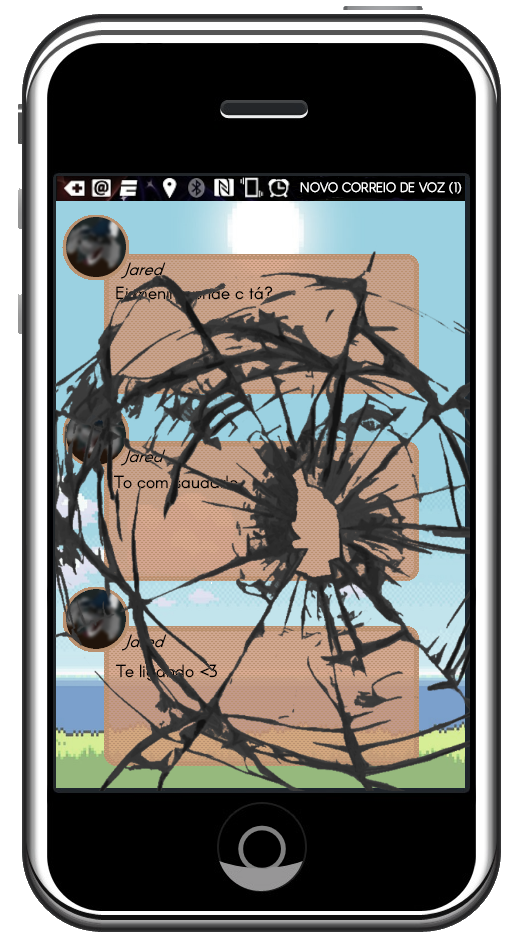
<style>
.page{position:relative;width:515px;height:943px;background:#000000}
.page>*{position:absolute;margin:0}
.t1{font:13.3px "Arcon-Regular";color:#ffffff;scale:0.92 1}
.t2{font:17.3px "Arcon-Regular";color:#000000}
</style>
<div class="page">
<p class="t1" style="left:300px;top:182px;width:162px;height:12px">NOVO CORREIO DE VOZ (1)</p>
<p class="t2" style="left:116px;top:286px;width:157px;height:14px">Ei menino onde c tá?</p>
<p class="t2" style="left:114px;top:475px;width:124px;height:14px">To com saudade</p>
<p class="t2" style="left:116px;top:664px;width:101px;height:17px">Te ligando &lt;3</p>
</div>
